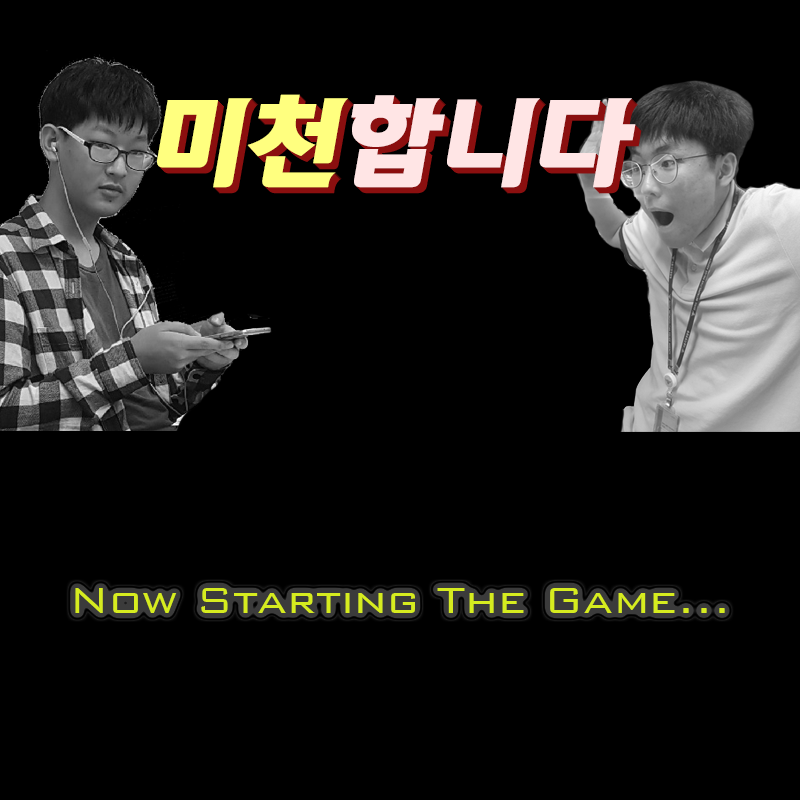
<style>
.page{position:relative;width:800px;height:800px;background:#000000}
.page>*{position:absolute;margin:0}
.t1{font:100px "KoreanSPD-R";color:#ffe5e5}
.t2{font:100px "KoreanSPD-R";color:#ffff7f}
.t3{font:48px "BankGothicBT-Light";color:#d6ec1f}
</style>
<div class="page">
<p class="t1" style="left:157px;top:94px;width:479px;height:94px"><span class="t2">미천</span>합니다</p>
<p class="t3" style="left:75px;top:588px;width:650px;height:25px">Now Starting The Game...</p>
</div>
